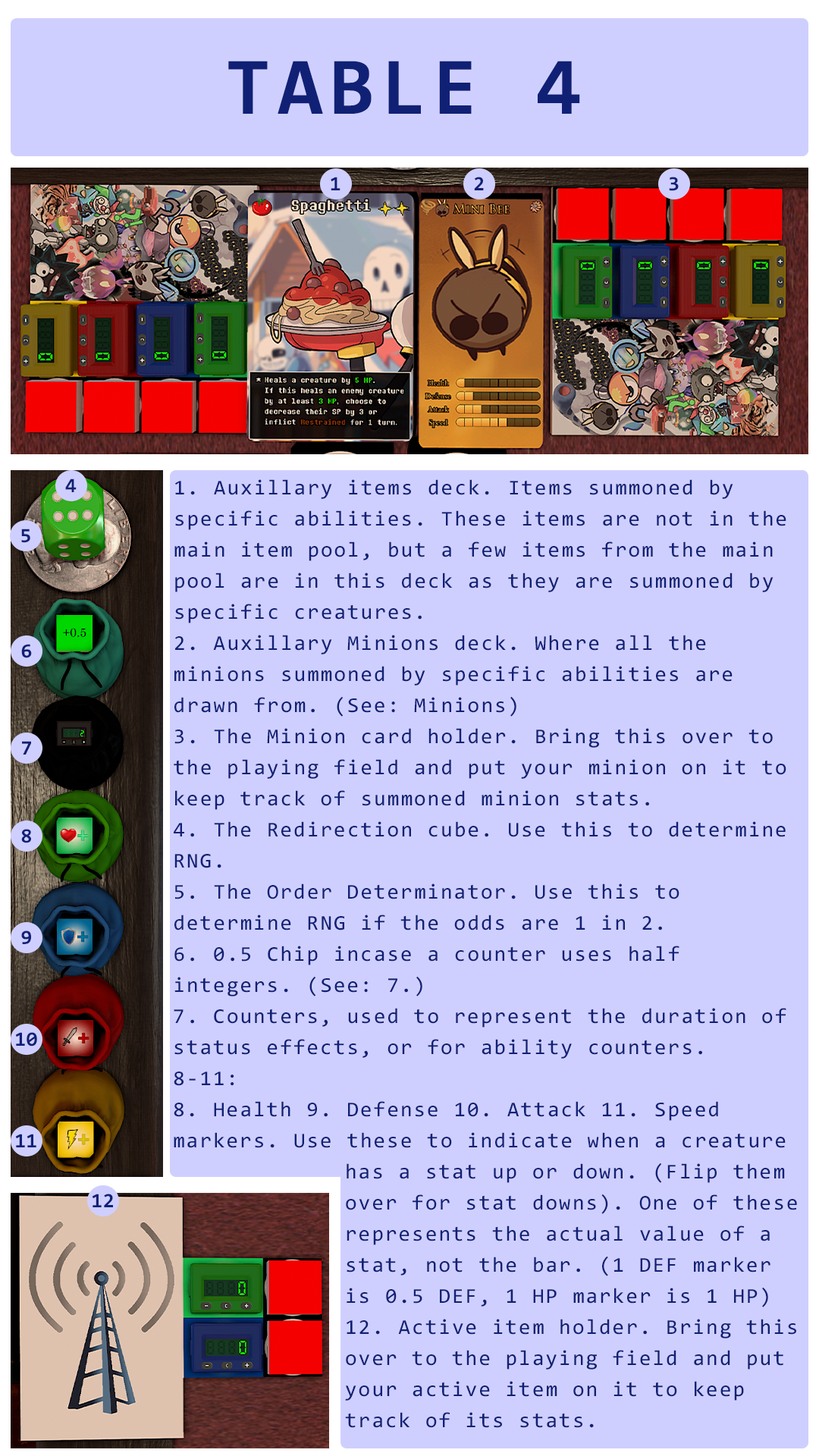
<style>
.page{position:relative;width:819px;height:1456px;background:#cfcfff}
.page>*{position:absolute;margin:0}
.t1{font:82.2px "Consolas-Bold";letter-spacing:0.08em;color:#102175}
.t2{font:20.5px "Consolas-Bold";color:#102175}
.t3{font:21.2px/31.1px "Consolas";letter-spacing:0.08em;color:#102175}
</style>
<div class="page">
<p class="t1" style="left:228px;top:61px;width:352px;height:53px">TABLE 4</p>
<p class="t2" style="left:331px;top:177px;width:9px;height:13px">1</p>
<p class="t2" style="left:474px;top:177px;width:10px;height:13px">2</p>
<p class="t2" style="left:669px;top:177px;width:10px;height:14px">3</p>
<p class="t2" style="left:65px;top:479px;width:12px;height:13px">4</p>
<p class="t3" style="left:174px;top:479px;width:623px;height:949px">1. Auxillary items deck. Items summoned by specific abilities. These items are not in the main item pool, but a few items from the main pool are in this deck as they are summoned by specific creatures.<br>2. Auxillary Minions deck. Where all the minions summoned by specific abilities are drawn from. (See: Minions)<br>3. The Minion card holder. Bring this over to the playing field and put your minion on it to keep track of summoned minion stats.<br>4. The Redirection cube. Use this to determine RNG.<br>5. The Order Determinator. Use this to determine RNG if the odds are 1 in 2.<br>6. 0.5 Chip incase a counter uses half integers. (See: 7.)<br>7. Counters, used to represent the duration of status effects, or for ability counters.<br>8-11:<br>8. Health 9. Defense 10. Attack 11. Speed markers. Use these to indicate when a creature has a stat up or down. (Flip them over for stat downs). One of these represents the actual value of a stat, not the bar. (1 DEF marker is 0.5 DEF, 1 HP marker is 1 HP)<br>12. Active item holder. Bring this over to the playing field and put your active item on it to keep track of its stats.</p>
<p class="t2" style="left:21px;top:529px;width:9px;height:14px">5</p>
<p class="t2" style="left:21px;top:644px;width:11px;height:14px">6</p>
<p class="t2" style="left:22px;top:741px;width:9px;height:14px">7</p>
<p class="t2" style="left:21px;top:829px;width:10px;height:14px">8</p>
<p class="t2" style="left:21px;top:930px;width:10px;height:14px">9</p>
<p class="t2" style="left:15px;top:1032px;width:22px;height:14px">10</p>
<p class="t2" style="left:15px;top:1134px;width:21px;height:13px">11</p>
<p class="t2" style="left:92px;top:1194px;width:21px;height:13px">12</p>
</div>
